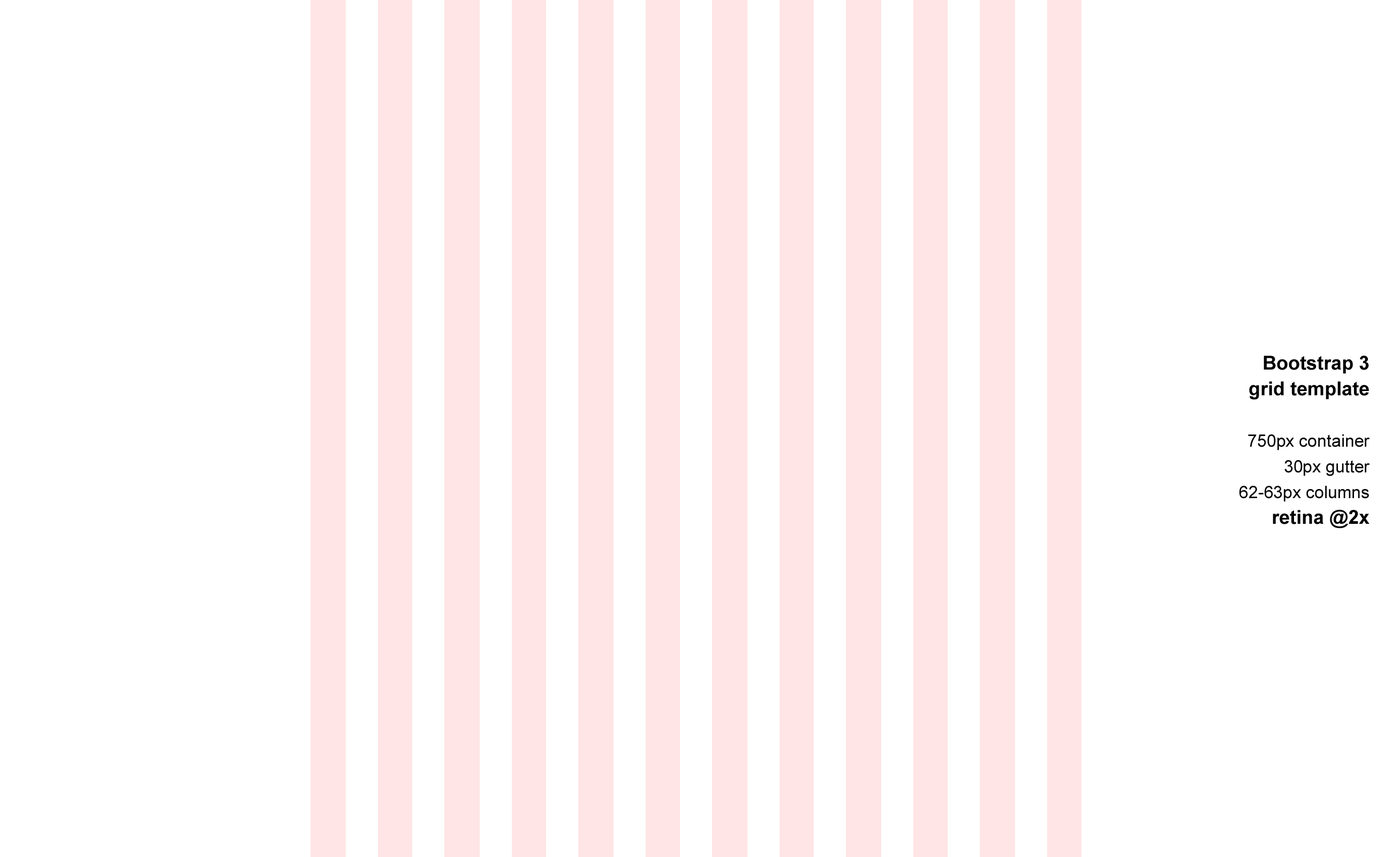
<style>
.page{position:relative;width:1392px;height:857px;background:#ffffff}
.page>*{position:absolute;margin:0}
.t1{font:17.1px/25.7px "ArialMT";color:#000000}
.t2{font:19.3px/25.7px "Arial-BoldMT";color:#000000}
</style>
<div class="page">
<p class="t1" style="left:1239px;top:355px;width:131px;height:173px;text-align:right"><span class="t2">Bootstrap 3<br>grid template<br><br></span>750px container<br>30px gutter<br>62-63px columns<span class="t2"><br>retina @2x</span></p>
</div>
